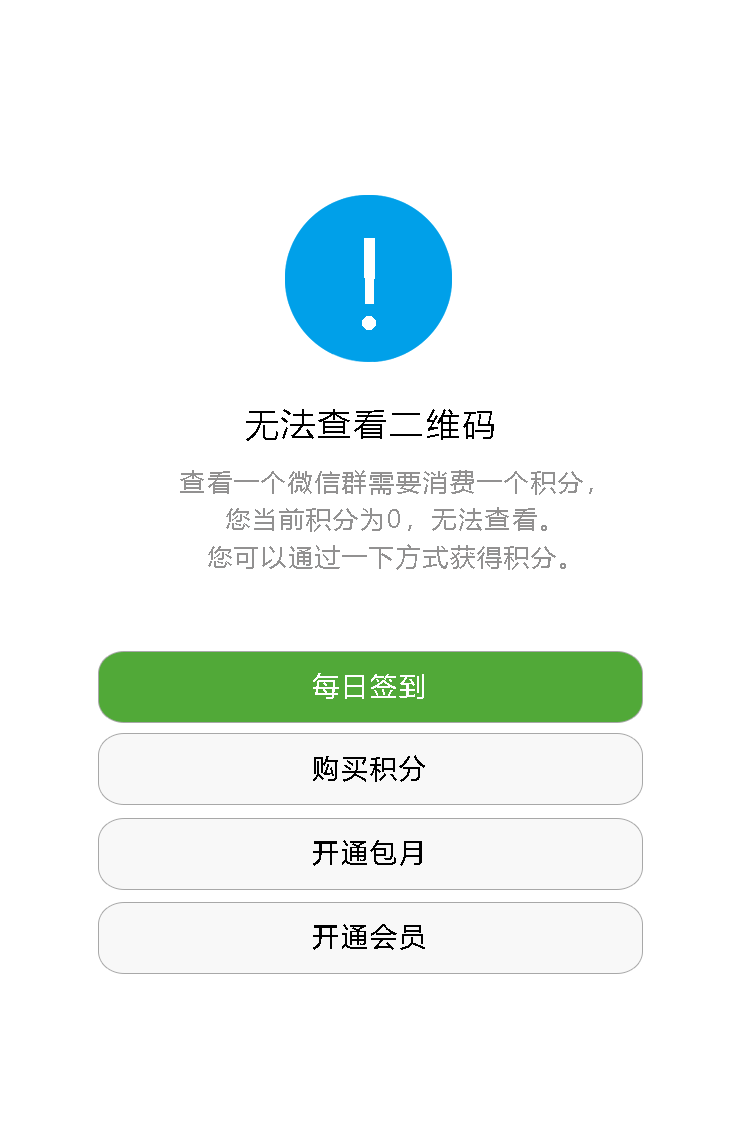
<style>
.page{position:relative;width:740px;height:1136px;background:#ffffff}
.page>*{position:absolute;margin:0}
.t1{font:33.5px "MicrosoftYaHei";letter-spacing:0.08em;color:#000000}
.t2{font:25px/37.5px "MicrosoftYaHei";letter-spacing:0.08em;color:#929191}
.t3{font:27.3px "MicrosoftYaHei";letter-spacing:0.08em;color:#ffffff}
.t4{font:27.3px "MicrosoftYaHei";letter-spacing:0.08em;color:#000000}
</style>
<div class="page">
<p class="t1" style="left:246px;top:409px;width:248px;height:32px">无法查看二维码</p>
<p class="t2" style="left:180px;top:470px;width:413px;height:100px;text-align:center">查看一个微信群需要消费一个积分，<br>您当前积分为0，无法查看。<br>您可以通过一下方式获得积分。</p>
<p class="t3" style="left:313px;top:673px;width:111px;height:26px">每日签到</p>
<p class="t4" style="left:313px;top:755px;width:112px;height:27px">购买积分</p>
<p class="t4" style="left:313px;top:840px;width:109px;height:26px">开通包月</p>
<p class="t4" style="left:313px;top:924px;width:112px;height:26px">开通会员</p>
</div>
